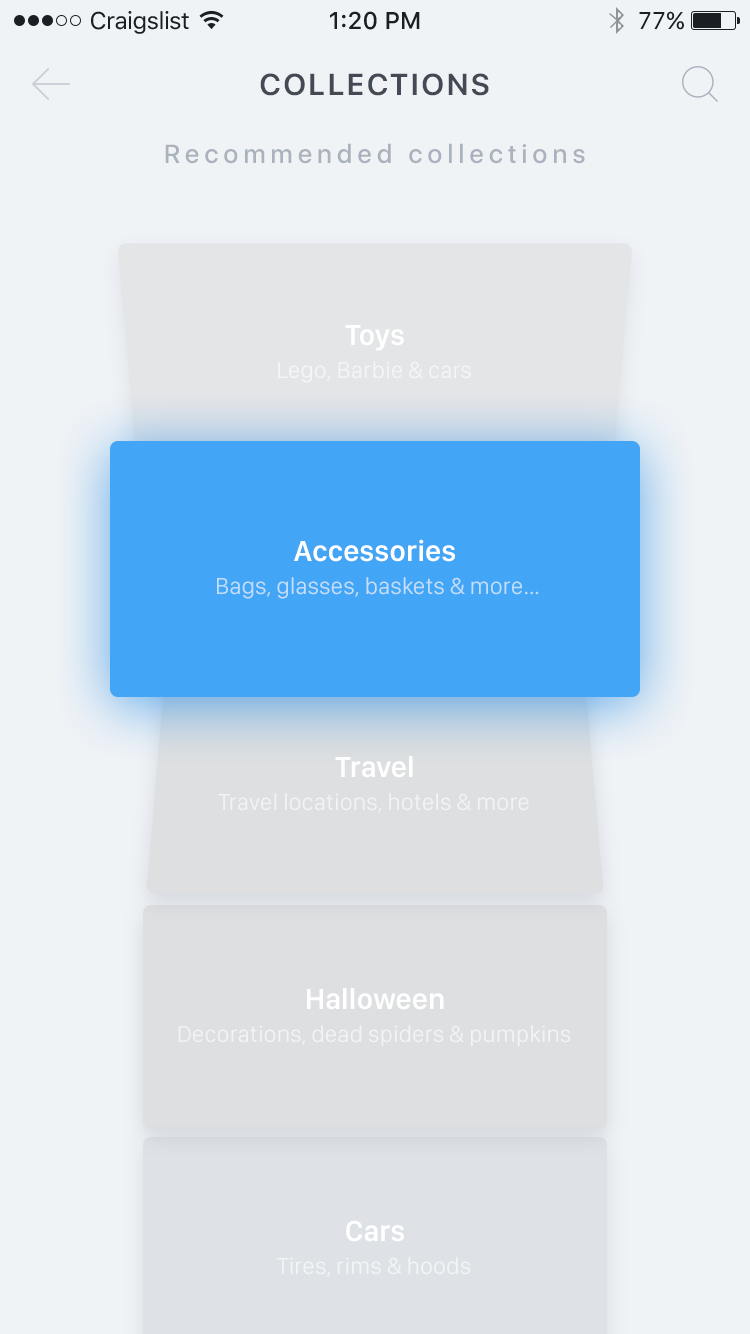
<style>
.page{position:relative;width:750px;height:1334px;background:#f0f3f6}
.page>*{position:absolute;margin:0}
.t1{font:24px "SFUIText-Regular";letter-spacing:-0.025em;color:#1b1e23}
.t2{font:24px "SFUIText-Medium";color:#1b1e23}
.t3{font:24px "SFUIText-Regular";color:#1b1e23}
.t4{font:30px "SFUIDisplay-Semibold";letter-spacing:0.1em;color:#434a54;text-transform:uppercase}
.t5{font:26px "SFUIDisplay-Medium";letter-spacing:0.2em;color:#aab2bd}
.t6{font:30px "SFCompactDisplay-Semibold";color:#ffffff}
.t7{font:24px "SFCompactDisplay-Regular";color:#ffffff}
.t8{font:24px "SFCompactDisplay-Regular";color:#c2defb}
</style>
<div class="page">
<p class="t1" style="left:91px;top:11px;width:98px;height:23px">Craigslist</p>
<p class="t2" style="left:330px;top:11px;width:90px;height:19px">1:20 PM</p>
<p class="t3" style="left:639px;top:11px;width:45px;height:19px">77%</p>
<p class="t4" style="left:260px;top:73px;width:229px;height:23px">Collections</p>
<p class="t5" style="left:165px;top:143px;width:420px;height:21px">Recommended collections</p>
<p class="t6" style="left:345px;top:325px;width:59px;height:26px">Toys</p>
<p class="t7" style="left:278px;top:361px;width:193px;height:22px;opacity:0.6">Lego, Barbie &amp; cars</p>
<p class="t6" style="left:294px;top:539px;width:161px;height:23px">Accessories</p>
<p class="t8" style="left:217px;top:577px;width:322px;height:22px">Bags, glasses, baskets &amp; more...</p>
<p class="t6" style="left:335px;top:756px;width:78px;height:22px">Travel</p>
<p class="t7" style="left:218px;top:793px;width:311px;height:20px;opacity:0.6">Travel locations, hotels &amp; more</p>
<p class="t6" style="left:307px;top:988px;width:137px;height:22px">Halloween</p>
<p class="t7" style="left:178px;top:1025px;width:393px;height:22px;opacity:0.6">Decorations, dead spiders &amp; pumpkins</p>
<p class="t6" style="left:346px;top:1220px;width:58px;height:22px">Cars</p>
<p class="t7" style="left:277px;top:1257px;width:194px;height:20px;opacity:0.6">Tires, rims &amp; hoods</p>
</div>
